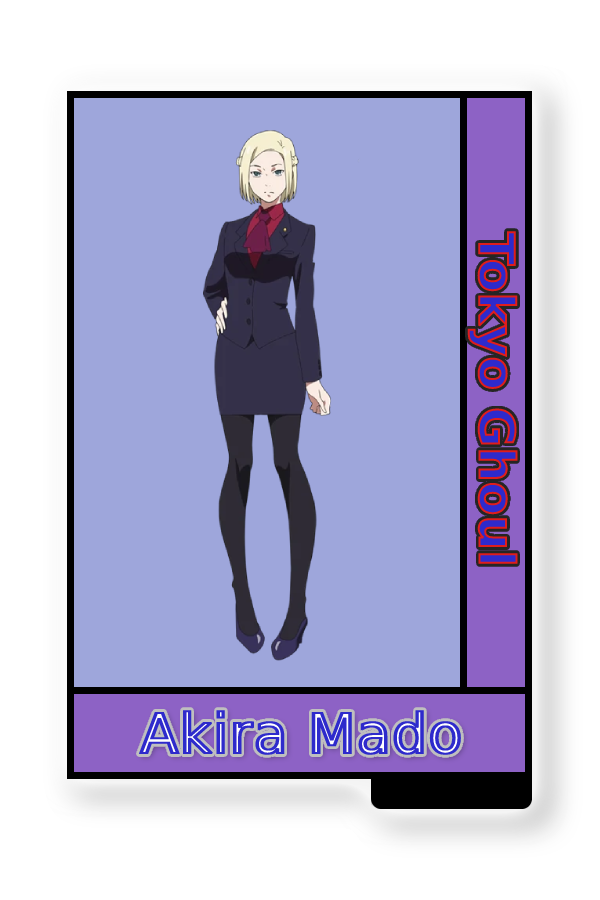
<style>
.page{position:relative;width:600px;height:900px;background:#9ea6db}
.page>*{position:absolute;margin:0}
.t1{font:48.8px "MADETOMMY-Bold"}
.t2{font:55px "CoolveticaRg-Regular";font-weight:bold}
</style>
<div class="page">
<p class="t1" style="left:467px;top:231px;width:51px;height:333px;rotate:90deg">Tokyo Ghoul</p>
<p class="t2" style="left:139px;top:710px;width:322px;height:45px">Akira Mado</p>
</div>
